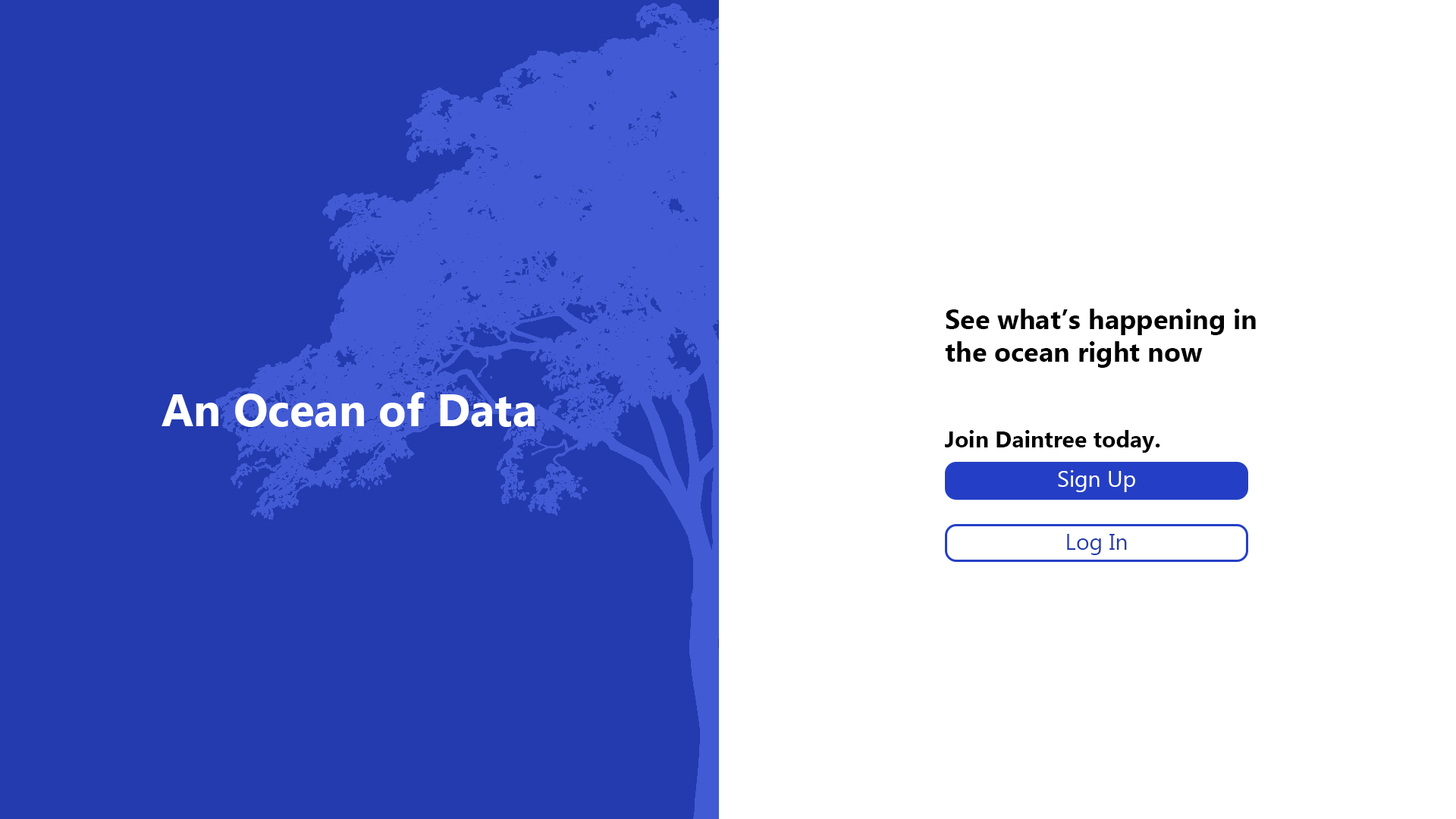
<style>
.page{position:relative;width:1456px;height:819px;background:#ffffff}
.page>*{position:absolute;margin:0}
.t1{font:27.3px "MyanmarText-Bold";color:#000000}
.t2{font:45.5px "MyanmarText-Bold";color:#ffffff}
.t3{font:22.7px "MyanmarText-Bold";color:#000000}
.t4{font:22.7px "MyanmarText";color:#ffffff}
.t5{font:22.7px "MyanmarText";color:#243baf}
</style>
<div class="page">
<p class="t1" style="left:945px;top:309px;width:311px;height:59px">See what’s happening in<br>the ocean right now</p>
<p class="t2" style="left:162px;top:392px;width:373px;height:35px">An Ocean of Data</p>
<p class="t3" style="left:945px;top:430px;width:215px;height:23px">Join Daintree today.</p>
<p class="t4" style="left:1058px;top:470px;width:77px;height:22px">Sign Up</p>
<p class="t5" style="left:1067px;top:534px;width:60px;height:21px">Log In</p>
</div>
